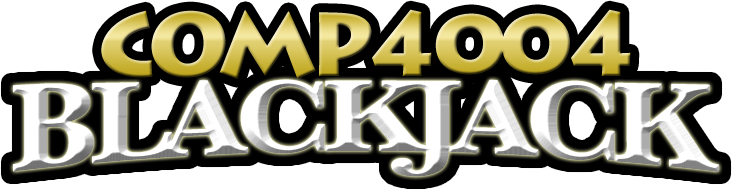
<style>
.page{position:relative;width:732px;height:190px;background:#ffffff}
.page>*{position:absolute;margin:0}
.t1{font:90px "LithosPro-Black";letter-spacing:-0.08em}
.t2{font:131px "Baskerville-Bold";letter-spacing:-0.08em}
</style>
<div class="page">
<p class="t1" style="left:101px;top:9px;width:530px;height:70px">COMP4004</p>
<p class="t2" style="left:13px;top:79px;width:706px;height:98px">BLACKJACK</p>
</div>
